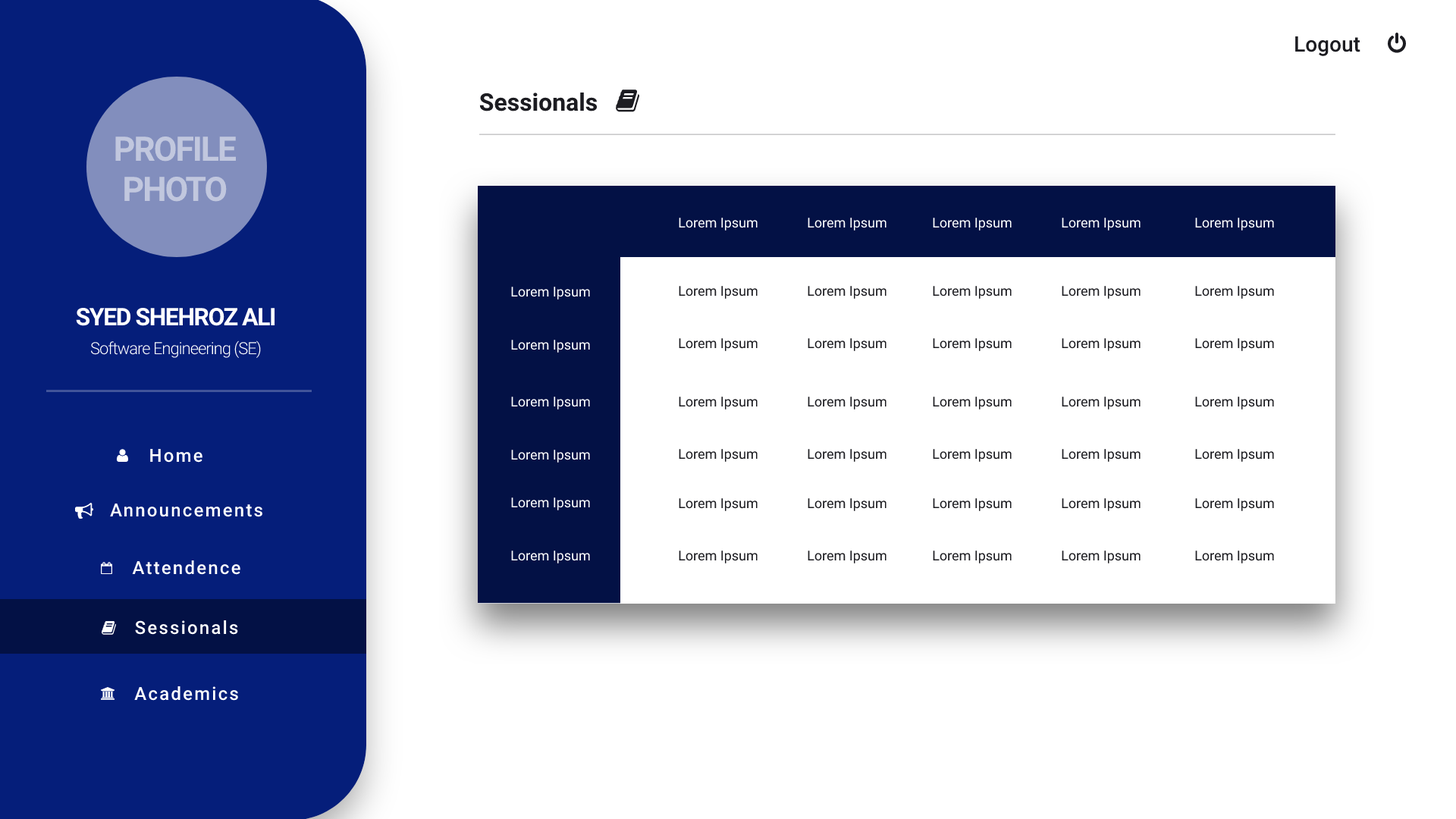
<style>
.page{position:relative;width:1456px;height:819px;background:#ffffff}
.page>*{position:absolute;margin:0}
.t1{font:21.2px "Roboto-Medium";color:#1c1c21}
.t2{font:24.3px "Roboto-Bold";color:#1c1c21}
.t3{font:33.8px "Roboto-Bold";letter-spacing:-0.046em;color:#c1c7de}
.t4{font:13.6px "Roboto-Regular";color:#ffffff}
.t5{font:13.6px "Roboto-Regular";color:#1c1c21}
.t6{font:24.3px "Roboto-Bold";letter-spacing:-0.046em;color:#ffffff}
.t7{font:16.7px "Roboto-Light";letter-spacing:-0.046em;color:#ffffff}
.t8{font:18.2px "Roboto-Medium";letter-spacing:0.092em;color:#ffffff}
</style>
<div class="page">
<p class="t1" style="left:1295px;top:36px;width:65px;height:20px">Logout</p>
<p class="t2" style="left:479px;top:93px;width:119px;height:18px">Sessionals</p>
<p class="t3" style="left:115px;top:136px;width:121px;height:66px;text-align:center">PROFILE<br>PHOTO</p>
<p class="t4" style="left:679px;top:218px;width:79px;height:13px">Lorem Ipsum</p>
<p class="t4" style="left:808px;top:218px;width:78px;height:13px">Lorem Ipsum</p>
<p class="t4" style="left:933px;top:218px;width:79px;height:13px">Lorem Ipsum</p>
<p class="t4" style="left:1062px;top:218px;width:79px;height:13px">Lorem Ipsum</p>
<p class="t4" style="left:1195px;top:218px;width:79px;height:13px">Lorem Ipsum</p>
<p class="t4" style="left:511px;top:287px;width:79px;height:13px">Lorem Ipsum</p>
<p class="t5" style="left:679px;top:286px;width:79px;height:13px">Lorem Ipsum</p>
<p class="t5" style="left:808px;top:286px;width:78px;height:13px">Lorem Ipsum</p>
<p class="t5" style="left:933px;top:286px;width:79px;height:13px">Lorem Ipsum</p>
<p class="t5" style="left:1062px;top:286px;width:79px;height:13px">Lorem Ipsum</p>
<p class="t5" style="left:1195px;top:286px;width:79px;height:13px">Lorem Ipsum</p>
<p class="t6" style="left:76px;top:307px;width:199px;height:19px">SYED SHEHROZ ALI</p>
<p class="t7" style="left:90px;top:340px;width:171px;height:19px">Software Engineering (SE)</p>
<p class="t4" style="left:511px;top:340px;width:79px;height:13px">Lorem Ipsum</p>
<p class="t5" style="left:679px;top:338px;width:79px;height:13px">Lorem Ipsum</p>
<p class="t5" style="left:808px;top:338px;width:78px;height:13px">Lorem Ipsum</p>
<p class="t5" style="left:933px;top:338px;width:79px;height:13px">Lorem Ipsum</p>
<p class="t5" style="left:1062px;top:338px;width:79px;height:13px">Lorem Ipsum</p>
<p class="t5" style="left:1195px;top:338px;width:79px;height:13px">Lorem Ipsum</p>
<p class="t4" style="left:511px;top:397px;width:79px;height:12px">Lorem Ipsum</p>
<p class="t5" style="left:679px;top:397px;width:79px;height:12px">Lorem Ipsum</p>
<p class="t5" style="left:808px;top:397px;width:78px;height:12px">Lorem Ipsum</p>
<p class="t5" style="left:933px;top:397px;width:79px;height:12px">Lorem Ipsum</p>
<p class="t5" style="left:1062px;top:397px;width:79px;height:12px">Lorem Ipsum</p>
<p class="t5" style="left:1195px;top:397px;width:79px;height:12px">Lorem Ipsum</p>
<p class="t8" style="left:150px;top:448px;width:52px;height:15px">Home</p>
<p class="t4" style="left:511px;top:450px;width:79px;height:13px">Lorem Ipsum</p>
<p class="t5" style="left:679px;top:449px;width:79px;height:13px">Lorem Ipsum</p>
<p class="t5" style="left:808px;top:449px;width:78px;height:13px">Lorem Ipsum</p>
<p class="t5" style="left:933px;top:449px;width:79px;height:13px">Lorem Ipsum</p>
<p class="t5" style="left:1062px;top:449px;width:79px;height:13px">Lorem Ipsum</p>
<p class="t5" style="left:1195px;top:449px;width:79px;height:13px">Lorem Ipsum</p>
<p class="t4" style="left:511px;top:497px;width:79px;height:13px">Lorem Ipsum</p>
<p class="t8" style="left:110px;top:503px;width:152px;height:14px">Announcements</p>
<p class="t5" style="left:679px;top:498px;width:79px;height:13px">Lorem Ipsum</p>
<p class="t5" style="left:808px;top:498px;width:78px;height:13px">Lorem Ipsum</p>
<p class="t5" style="left:933px;top:498px;width:79px;height:13px">Lorem Ipsum</p>
<p class="t5" style="left:1062px;top:498px;width:79px;height:13px">Lorem Ipsum</p>
<p class="t5" style="left:1195px;top:498px;width:79px;height:13px">Lorem Ipsum</p>
<p class="t4" style="left:511px;top:551px;width:79px;height:12px">Lorem Ipsum</p>
<p class="t5" style="left:679px;top:551px;width:79px;height:12px">Lorem Ipsum</p>
<p class="t5" style="left:808px;top:551px;width:78px;height:12px">Lorem Ipsum</p>
<p class="t5" style="left:933px;top:551px;width:79px;height:12px">Lorem Ipsum</p>
<p class="t5" style="left:1062px;top:551px;width:79px;height:12px">Lorem Ipsum</p>
<p class="t5" style="left:1195px;top:551px;width:79px;height:12px">Lorem Ipsum</p>
<p class="t8" style="left:132px;top:560px;width:108px;height:15px">Attendence</p>
<p class="t8" style="left:135px;top:620px;width:103px;height:15px">Sessionals</p>
<p class="t8" style="left:134px;top:686px;width:104px;height:15px">Academics</p>
</div>
